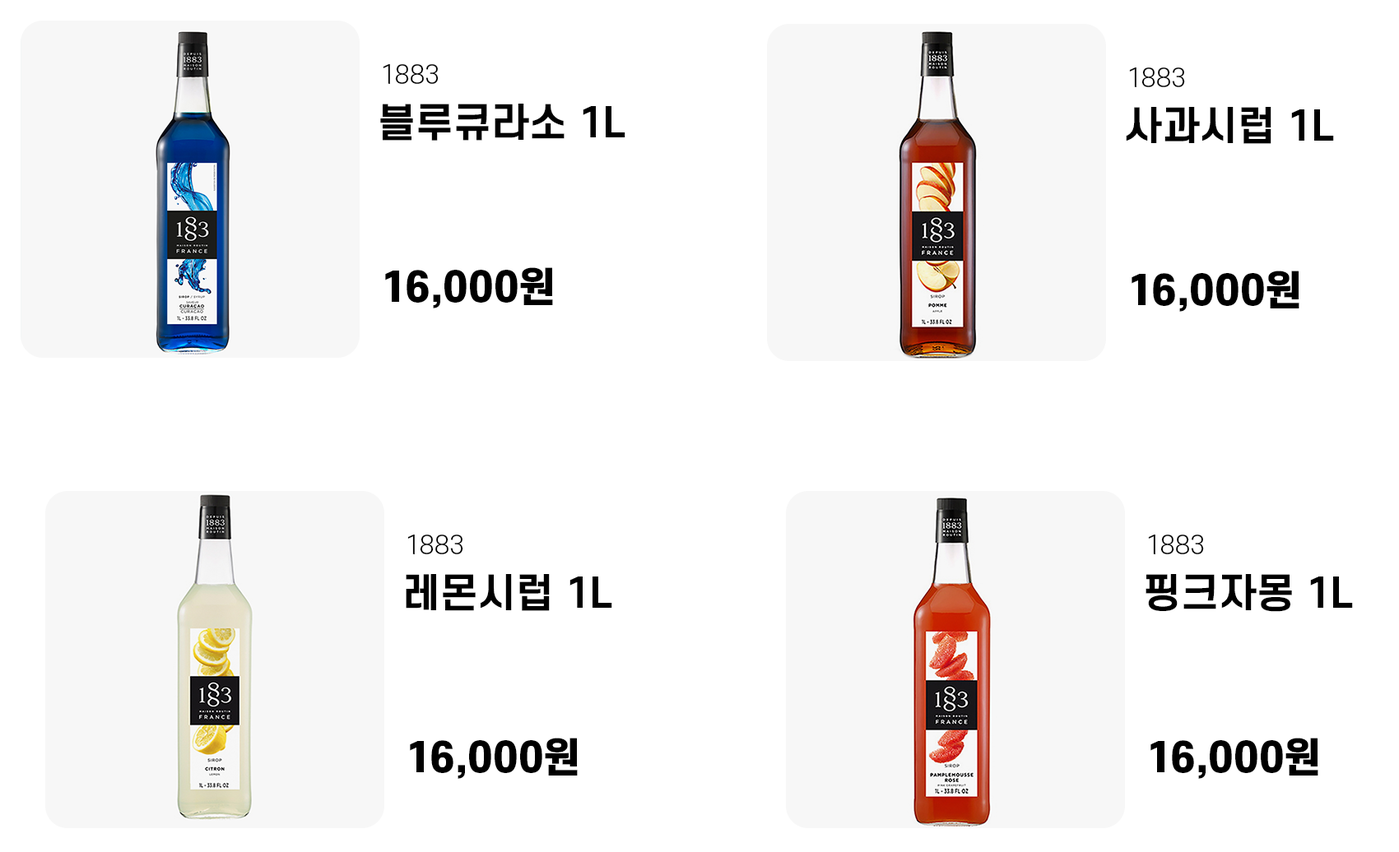
<style>
.page{position:relative;width:1399px;height:852px;background:#ffffff}
.page>*{position:absolute;margin:0}
.t1{font:24.7px "S-CoreDream-3Light";color:#000000}
.t2{font:39.5px "S-CoreDream-6Bold";color:#000000}
.t3{font:39.5px "S-CoreDream-8Heavy";color:#000000}
</style>
<div class="page">
<p class="t1" style="left:383px;top:64px;width:56px;height:20px">1883</p>
<p class="t1" style="left:1129px;top:67px;width:56px;height:20px">1883</p>
<p class="t2" style="left:380px;top:104px;width:245px;height:37px">블루큐라소 1L</p>
<p class="t2" style="left:1126px;top:107px;width:208px;height:37px">사과시럽 1L</p>
<p class="t3" style="left:385px;top:267px;width:168px;height:42px">16,000원</p>
<p class="t3" style="left:1131px;top:271px;width:168px;height:41px">16,000원</p>
<p class="t1" style="left:407px;top:535px;width:56px;height:20px">1883</p>
<p class="t1" style="left:1148px;top:535px;width:56px;height:20px">1883</p>
<p class="t2" style="left:406px;top:574px;width:206px;height:37px">레몬시럽 1L</p>
<p class="t2" style="left:1145px;top:574px;width:208px;height:38px">핑크자몽 1L</p>
<p class="t3" style="left:410px;top:738px;width:168px;height:41px">16,000원</p>
<p class="t3" style="left:1150px;top:738px;width:168px;height:41px">16,000원</p>
</div>
